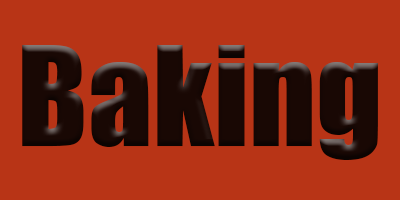
<style>
.page{position:relative;width:400px;height:200px;background:#b83416}
.page>*{position:absolute;margin:0}
.t1{font:128.2px "Impact";color:#190804}
</style>
<div class="page">
<p class="t1" style="left:22px;top:45px;width:356px;height:115px">Baking</p>
</div>
